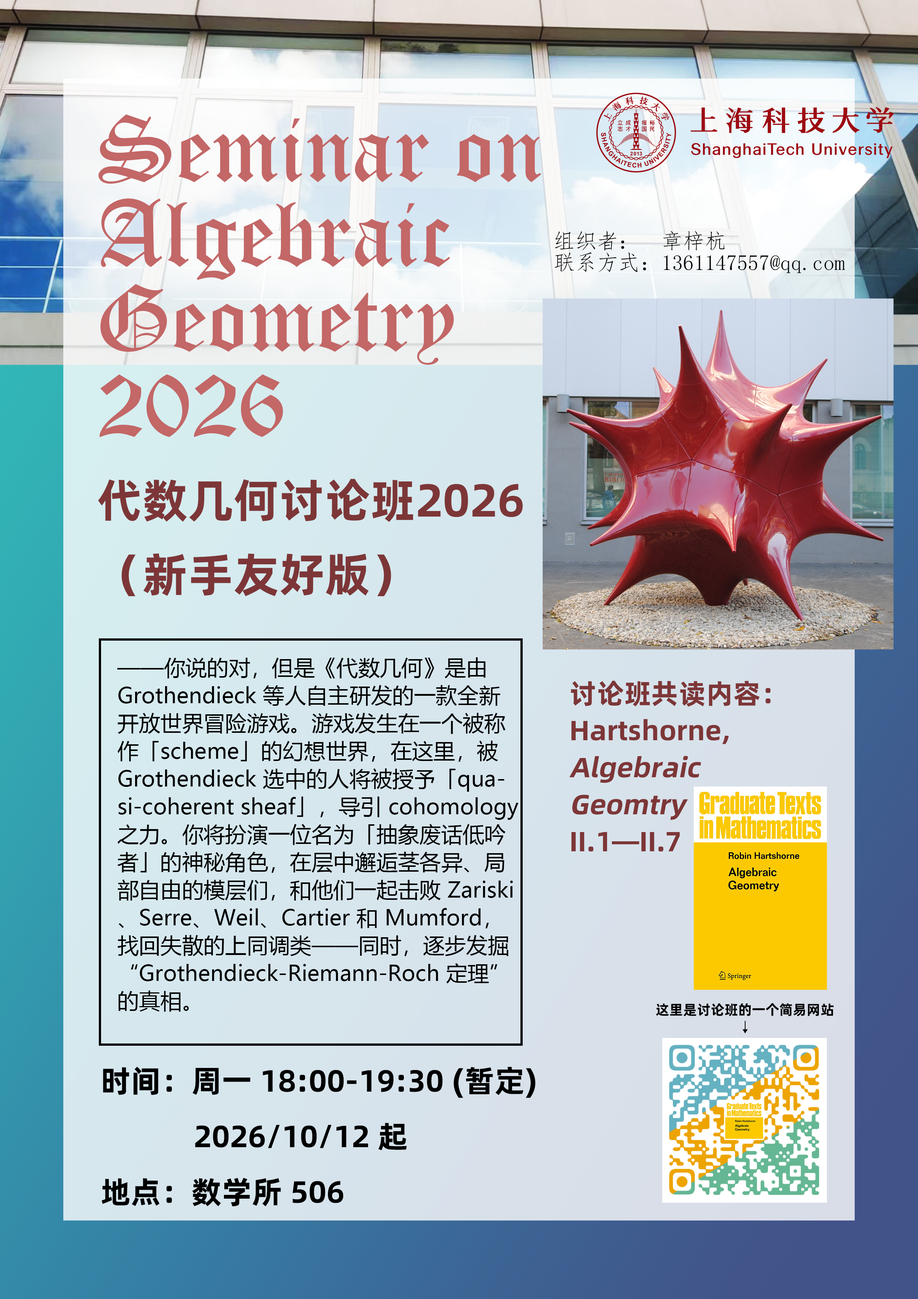
<style>
.page{position:relative;width:918px;height:1299px}
.page>*{position:absolute;margin:0}
.t1{font:92.6px/84.8px "OldEnglishTextMT";color:#c36767}
.t2{font:21.6px/21.6px "FangSong";color:#000000}
.t3{font:46.3px/74px "Alibaba-PuHuiTi-B";color:#7d3637}
.t4{font:21.6px/27.8px "MicrosoftYaHei";color:#000000}
.t5{font:27.8px/37px "Alibaba-PuHuiTi-B";color:#7d3637}
.t6{font:27.8px/37px "Alibaba-PuHuiTi-B";color:#7d3637;font-style:italic}
.t7{font:14px/17.5px "Alibaba-PuHuiTi-B";color:#000000}
.t8{font:14px/17.5px "AdobeHeitiStd-Regular";color:#000000}
.t9{font:30.9px/55.5px "Alibaba-PuHuiTi-B";color:#000000}
</style>
<div class="page">
<p class="t1" style="left:98px;top:114px;width:443px;height:323px">Seminar on <br>Algebraic <br>Geometry<br>2026</p>
<p class="t2" style="left:555px;top:231px;width:290px;height:42px">组织者：  章梓杭<br>联系方式：1361147557@qq.com</p>
<p class="t3" style="left:98px;top:479px;width:425px;height:117px">代数几何讨论班2026<br>（新手友好版）</p>
<p class="t4" style="left:117px;top:657px;width:402px;height:354px">——你说的对，但是《代数几何》是由 Grothendieck 等人自主研发的一款全新开放世界冒险游戏。游戏发生在一个被称作「scheme」的幻想世界，在这里，被 Grothendieck 选中的人将被授予「quasi-coherent sheaf」，导引 cohomology 之力。你将扮演一位名为「抽象废话低吟者」的神秘角色，在层中邂逅茎各异、局部自由的模层们，和他们一起击败 Zariski、Serre、Weil、Cartier 和 Mumford，找回失散的上同调类——同时，逐步发掘“Grothendieck-Riemann-Roch 定理”的真相。</p>
<p class="t5" style="left:569px;top:680px;width:202px;height:172px">讨论班共读内容：<br>Hartshorne, <br><span class="t6">Algebraic<br>Geomtry<br></span>II.1—II.7</p>
<p class="t7" style="left:656px;top:1003px;width:178px;height:30px;text-align:center">这里是讨论班的一个简易网站<br><span class="t8">↓</span></p>
<p class="t9" style="left:101px;top:1066px;width:435px;height:140px">时间：周一 18:00-19:30 (暂定)<br>       2026/10/12 起<br>地点：数学所 506</p>
</div>
